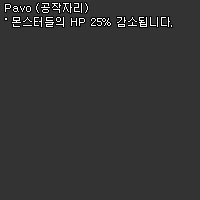
<style>
.page{position:relative;width:200px;height:200px;background:#333333}
.page>*{position:absolute;margin:0}
.t1{font:11px/14px "Dotum";color:#ffffff}
</style>
<div class="page">
<p class="t1" style="left:5px;top:3px;width:167px;height:24px">Pavo (공작자리)<br>˚ 몬스터들의 HP 25% 감소됩니다.</p>
</div>
